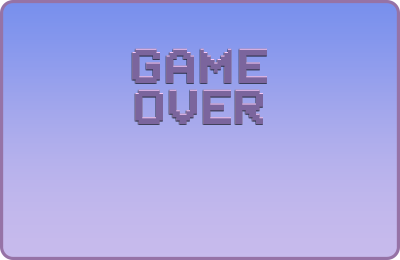
<style>
.page{position:relative;width:400px;height:260px}
.page>*{position:absolute;margin:0}
.t1{font:34.4px "PixCon";letter-spacing:0.03em;color:#7b659d}
</style>
<div class="page">
<p class="t1" style="left:132px;top:48px;width:135px;height:76px;text-align:center">Game<br>over</p>
</div>
